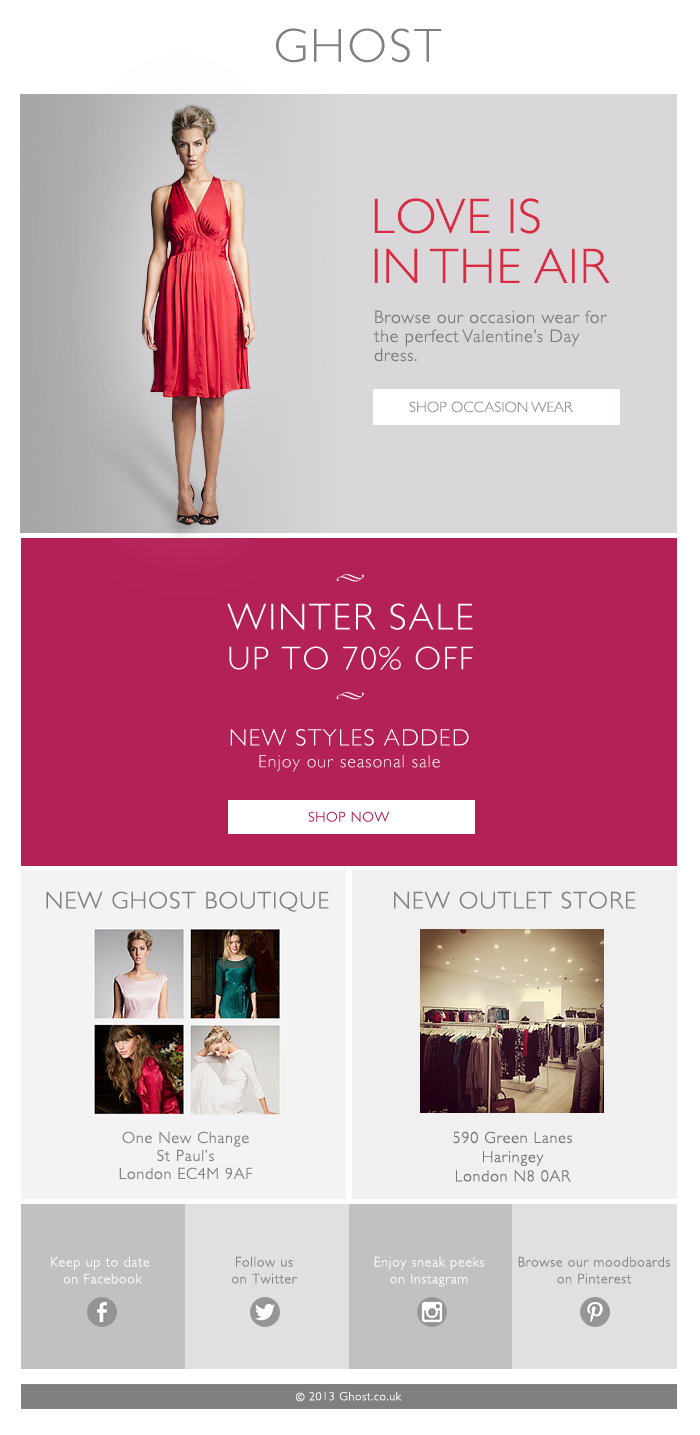
<style>
.page{position:relative;width:700px;height:1435px;background:#b42157}
.page>*{position:absolute;margin:0}
.t1{font:48px "GillSansLight-Regular";letter-spacing:0.05em;color:#808080;text-transform:uppercase}
.t2{font:50px/50px "GillSans-Light";letter-spacing:0.02em;color:#da2a42}
.t3{font:18px/19px "GillSans-Light";letter-spacing:0.04em;color:#7a7a7a}
.t4{font:15px "GillSans-Light";color:#999999}
.t5{font:33.1px "GillSansLight-Regular";letter-spacing:0.05em;color:#ffffff;text-transform:uppercase}
.t6{font:37.8px "GillSansLight-Regular";letter-spacing:0.05em;color:#ffffff;text-transform:uppercase}
.t7{font:18px "GillSansLight-Regular";letter-spacing:0.05em;color:#ffffff}
.t8{font:24px "GillSansLight-Regular";letter-spacing:0.05em;color:#ffffff;text-transform:uppercase}
.t9{font:14px "GillSansLight-Regular";letter-spacing:0.05em;color:#b42157;text-transform:uppercase}
.t10{font:24px "GillSansLight-Regular";letter-spacing:0.05em;color:#808080}
.t11{font:24px "GillSansLight-Regular";letter-spacing:0.05em;color:#808080;text-transform:uppercase}
.t12{font:16px/18px "GillSansLight-Regular";letter-spacing:0.05em;color:#808080}
.t13{font:16px "GillSansLight-Regular";letter-spacing:0.05em;color:#747474}
.t14{font:16px/30px "GillSansLight-Regular";letter-spacing:0.05em;color:#747474}
.t15{font:14px "GillSansLight-Regular";letter-spacing:0.05em;color:#ffffff}
.t16{font:14px "GillSansLight-Regular";letter-spacing:0.05em;color:#808080}
.t17{font:12px "GillSansLight-Regular";letter-spacing:0.05em;color:#ffffff}
</style>
<div class="page">
<p class="t1" style="left:276px;top:28px;width:166px;height:35px">ghost</p>
<p class="t2" style="left:374px;top:198px;width:236px;height:85px">LOVE IS<br>IN THE AIR</p>
<p class="t3" style="left:373px;top:310px;width:234px;height:52px">Browse our occasion wear for<br>the perfect Valentine’s Day<br>dress.</p>
<p class="t4" style="left:409px;top:401px;width:164px;height:12px">SHOP OCCASION WEAR</p>
<p class="t5" style="left:227px;top:603px;width:246px;height:67px;text-align:center"><span class="t6">Winter Sale <br></span>up to 70% off</p>
<p class="t7" style="left:230px;top:729px;width:239px;height:43px;text-align:center"><span class="t8">new styles added<br></span>Enjoy our seasonal sale</p>
<p class="t9" style="left:308px;top:811px;width:81px;height:11px">shop now</p>
<p class="t10" style="left:46px;top:891px;width:283px;height:21px">NEW GHOST BOUTIQUE</p>
<p class="t11" style="left:394px;top:891px;width:242px;height:18px"><span class="t10">NEW</span> outlet store</p>
<p class="t12" style="left:119px;top:1131px;width:134px;height:49px;text-align:center">One New Change<br>St Paul’s<br>London EC4M 9AF</p>
<p class="t13" style="left:453px;top:1131px;width:119px;height:51px;text-align:center"><span class="t14">590 Green Lanes<br></span>Haringey<br>London N8 0AR</p>
<p class="t15" style="left:51px;top:1256px;width:99px;height:28px;text-align:center">Keep up to date<br> on Facebook</p>
<p class="t16" style="left:232px;top:1256px;width:65px;height:28px;text-align:center">Follow us<br>on Twitter</p>
<p class="t15" style="left:374px;top:1256px;width:110px;height:31px;text-align:center">Enjoy sneak peeks <br>on Instagram</p>
<p class="t16" style="left:518px;top:1256px;width:152px;height:28px;text-align:center">Browse our moodboards <br>on Pinterest</p>
<p class="t7" style="left:296px;top:1392px;width:9px;height:10px">©</p>
<p class="t17" style="left:309px;top:1391px;width:93px;height:10px"><span class="t7">  </span>2013 Ghost.co.uk</p>
</div>
